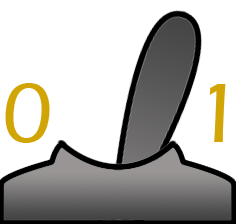
<style>
.page{position:relative;width:236px;height:224px;background:#ffffff}
.page>*{position:absolute;margin:0}
.t1{font:86.8px "ErasITC-Medium";color:#d2a507;scale:1.06 1}
</style>
<div class="page">
<p class="t1" style="left:5px;top:83px;width:221px;height:60px">0      1</p>
</div>
